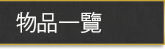
<style>
.page{position:relative;width:165px;height:49px}
.page>*{position:absolute;margin:0}
.t1{font:22px "GothicMB101Pr6N-Light";color:#fbfbf9}
</style>
<div class="page">
<p class="t1" style="left:16px;top:12px;width:86px;height:21px">物品一覽</p>
</div>
